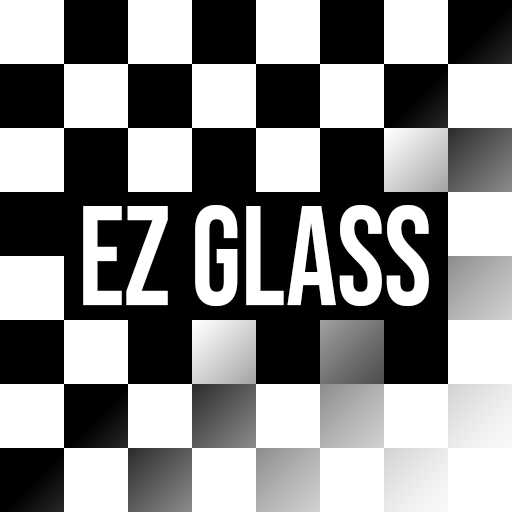
<style>
.page{position:relative;width:512px;height:512px;background:#ffffff}
.page>*{position:absolute;margin:0}
.t1{font:140.8px "BebasNeue-Regular";color:#ffffff;scale:0.91 1}
</style>
<div class="page">
<p class="t1" style="left:83px;top:205px;width:346px;height:101px">EZ Glass</p>
</div>
